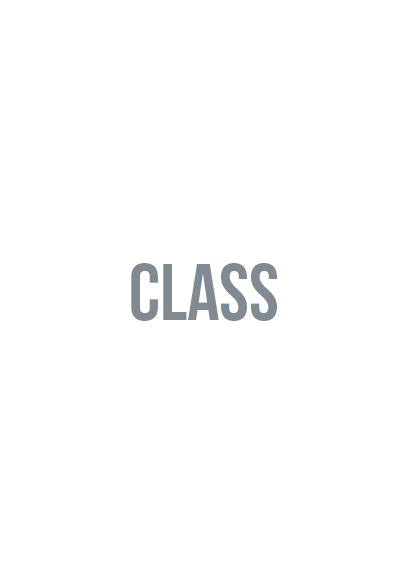
<style>
.page{position:relative;width:408px;height:585px;background:#ffffff}
.page>*{position:absolute;margin:0}
.t1{font:80px "BebasNeue";color:#808a92}
</style>
<div class="page">
<p class="t1" style="left:131px;top:263px;width:146px;height:58px">class</p>
</div>
